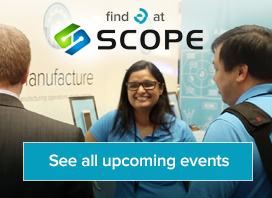
<style>
.page{position:relative;width:272px;height:198px}
.page>*{position:absolute;margin:0}
.t1{font:14px "ProximaNova-Semibold";letter-spacing:-0.012em;color:#565654}
.t2{font:17px "ProximaNova-Semibold";letter-spacing:-0.012em;color:#ffffff}
</style>
<div class="page">
<p class="t1" style="left:106px;top:11px;width:59px;height:11px">find       at</p>
<p class="t2" style="left:49px;top:154px;width:180px;height:16px">See all upcoming events</p>
</div>
